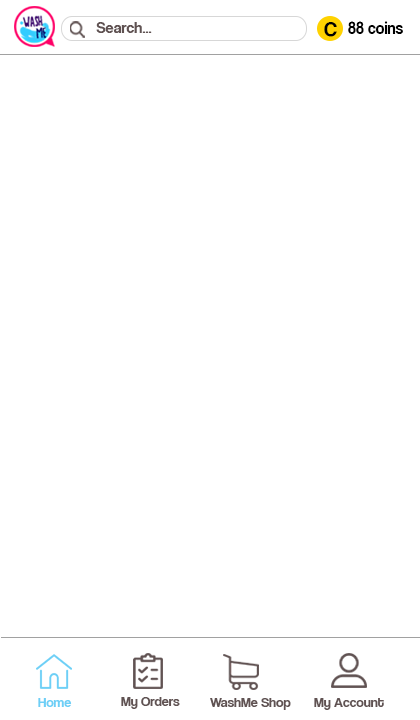
<style>
.page{position:relative;width:420px;height:720px;background:#ffffff}
.page>*{position:absolute;margin:0}
.t1{font:16px "CoolveticaRg-Regular";color:#605252}
.t2{font:21px "CoolveticaRg-Regular";color:#000000}
.t3{font:17.6px "CoolveticaRg-Regular";color:#000000;scale:0.92 1}
.t4{font:14px "CoolveticaRg-Regular";color:#6dcff6}
.t5{font:14px "CoolveticaRg-Regular";color:#605252}
</style>
<div class="page">
<p class="t1" style="left:96px;top:22px;width:56px;height:11px">Search...</p>
<p class="t2" style="left:324px;top:22px;width:13px;height:15px">C</p>
<p class="t3" style="left:348px;top:21px;width:55px;height:13px">88 coins</p>
<p class="t4" style="left:38px;top:698px;width:34px;height:9px">Home</p>
<p class="t5" style="left:121px;top:697px;width:59px;height:12px">My Orders</p>
<p class="t5" style="left:210px;top:698px;width:81px;height:12px">WashMe Shop</p>
<p class="t5" style="left:314px;top:698px;width:70px;height:12px">My Account</p>
</div>
